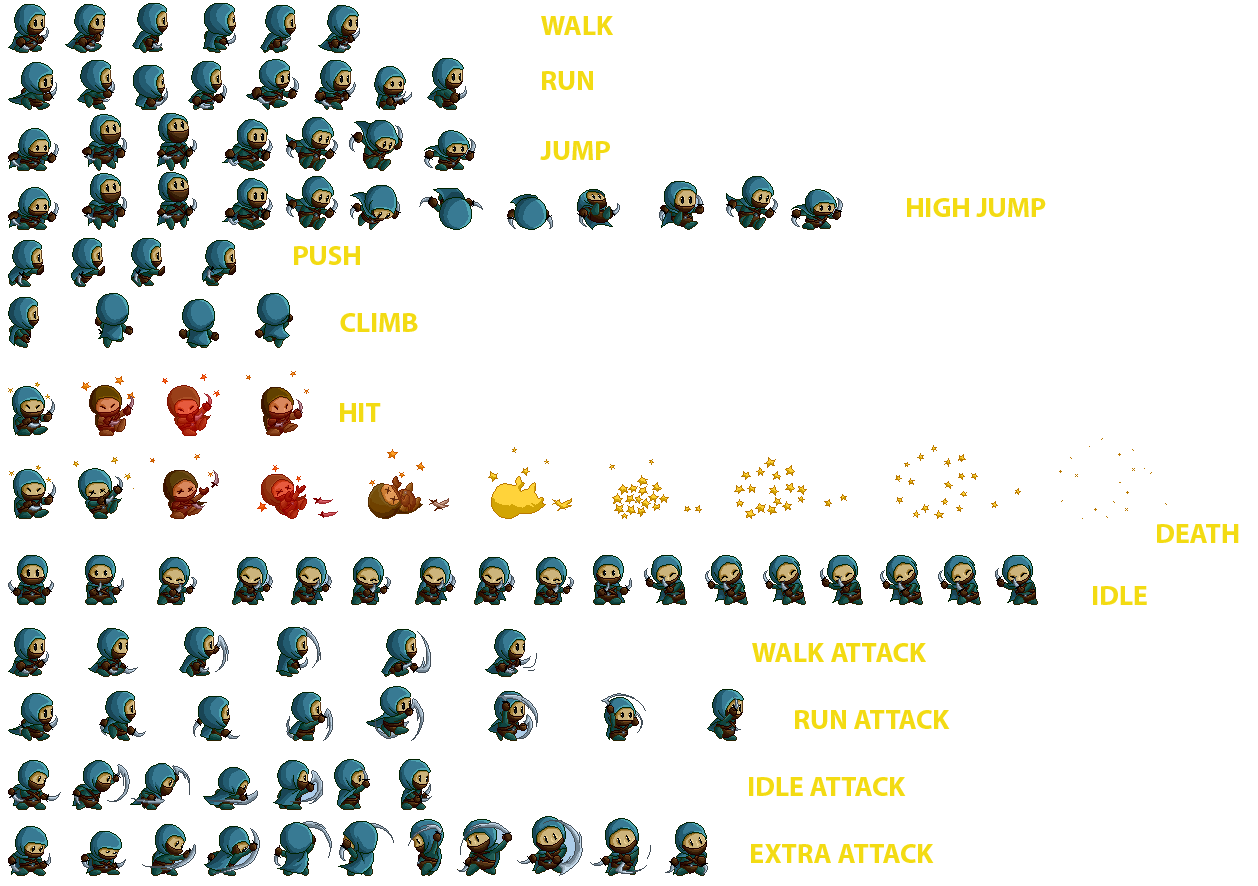
<style>
.page{position:relative;width:1258px;height:886px;background:#ffffff}
.page>*{position:absolute;margin:0}
.t1{font:27.8px "MyriadPro-Bold";color:#f3db13}
</style>
<div class="page">
<p class="t1" style="left:541px;top:16px;width:72px;height:19px">WALK</p>
<p class="t1" style="left:542px;top:71px;width:51px;height:19px">RUN</p>
<p class="t1" style="left:540px;top:141px;width:70px;height:19px">JUMP</p>
<p class="t1" style="left:907px;top:198px;width:139px;height:19px">HIGH JUMP</p>
<p class="t1" style="left:294px;top:246px;width:66px;height:19px">PUSH</p>
<p class="t1" style="left:340px;top:313px;width:78px;height:19px">CLIMB</p>
<p class="t1" style="left:340px;top:403px;width:41px;height:19px">HIT</p>
<p class="t1" style="left:1157px;top:524px;width:82px;height:19px">DEATH</p>
<p class="t1" style="left:1093px;top:586px;width:54px;height:19px">IDLE</p>
<p class="t1" style="left:752px;top:643px;width:174px;height:19px">WALK ATTACK</p>
<p class="t1" style="left:795px;top:710px;width:155px;height:19px">RUN ATTACK</p>
<p class="t1" style="left:749px;top:777px;width:157px;height:19px">IDLE ATTACK</p>
<p class="t1" style="left:751px;top:844px;width:183px;height:19px">EXTRA ATTACK</p>
</div>
